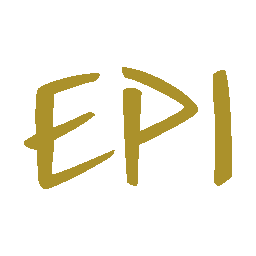
<style>
.page{position:relative;width:256px;height:256px;background:#ffffff}
.page>*{position:absolute;margin:0}
.t1{font:144.7px "AcadianRunes-Regular";color:#ab912b;text-transform:uppercase;scale:1.11 1}
</style>
<div class="page">
<p class="t1" style="left:24px;top:67px;width:208px;height:122px">EP1</p>
</div>
